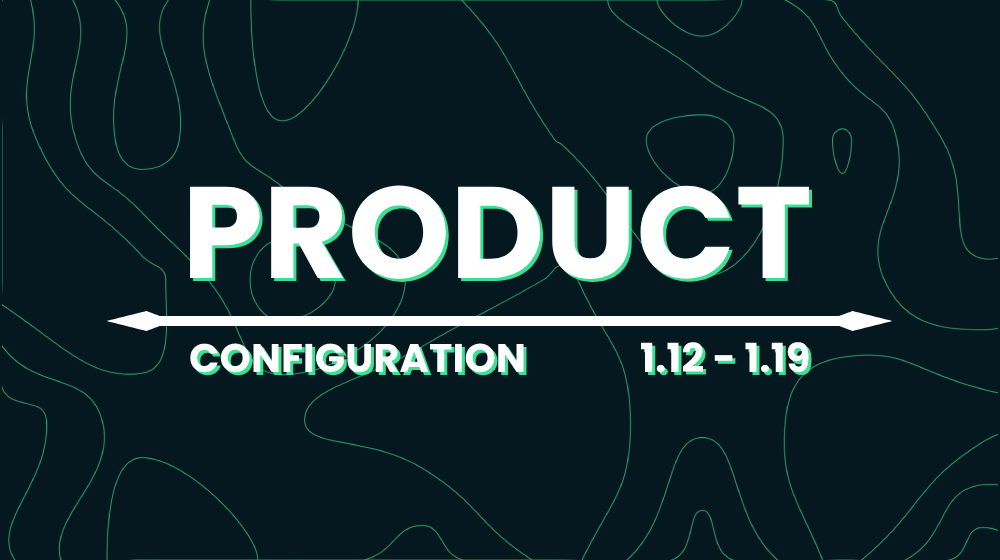
<style>
.page{position:relative;width:1000px;height:560px;background:#05181f}
.page>*{position:absolute;margin:0}
.t1{font:130px "Poppins-Bold";color:#ffffff}
.t2{font:40px "Poppins-Bold";color:#ffffff}
</style>
<div class="page">
<p class="t1" style="left:190px;top:185px;width:619px;height:94px">PRODUCT</p>
<p class="t2" style="left:641px;top:342px;width:168px;height:31px">1.12 - 1.19</p>
<p class="t2" style="left:190px;top:343px;width:334px;height:30px">CONFIGURATION</p>
</div>
